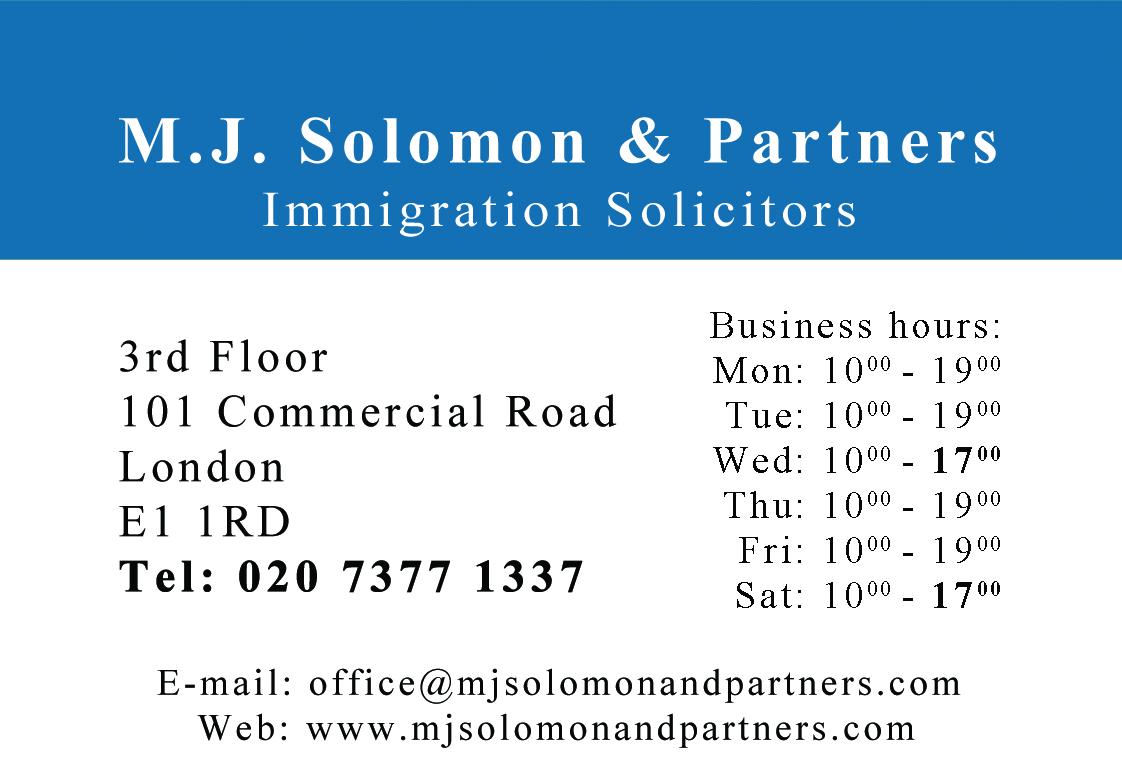
<style>
.page{position:relative;width:1122px;height:768px;background:#ffffff}
.page>*{position:absolute;margin:0}
.t1{font:66.7px "TimesNewRomanPS-BoldMT";letter-spacing:0.1em;color:#ffffff}
.t2{font:50px "TimesNewRomanPSMT";letter-spacing:0.1em;color:#ffffff;scale:1.06 1}
.t3{font:37.5px "TimesNewRomanPSMT";letter-spacing:0.1em;color:#060808}
.t4{font:37.5px "TimesNewRomanPSMT";letter-spacing:0.1em;color:#060808;font-variant:small-caps}
.t5{font:37.5px "TimesNewRomanPS-BoldMT";letter-spacing:0.1em;color:#060808;font-variant:small-caps}
.t6{font:45.8px "TimesNewRomanPSMT";letter-spacing:0.1em;color:#060808}
.t7{font:45.8px "TimesNewRomanPS-BoldMT";letter-spacing:0.1em;color:#060808;font-weight:bold}
</style>
<div class="page">
<p class="t1" style="left:119px;top:117px;width:877px;height:47px">M.J. Solomon &amp; Partners</p>
<p class="t2" style="left:263px;top:191px;width:592px;height:46px">Immigration Solicitors</p>
<p class="t3" style="left:710px;top:311px;width:290px;height:297px;text-align:right">Business hours:<br>Mon: 1000 <span class="t4">- 1900<br></span>Tue: 1000 <span class="t4">- 1900<br></span>Wed: 1000 <span class="t4">- </span><span class="t5">1700<br></span>Thu: 1000 <span class="t4">- 1900<br></span>Fri: 1000 <span class="t4">- 1900<br></span>Sat: 1000 <span class="t4">- </span><span class="t5">1700</span></p>
<p class="t6" style="left:119px;top:339px;width:498px;height:254px">3rd Floor <br>101 Commercial Road<br>London <br>E1 1RD<br><span class="t7">Tel: 020 7377 1337</span></p>
<p class="t3" style="left:157px;top:668px;width:804px;height:80px">E-mail: office@mjsolomonandpartners.com<br>   Web: www.mjsolomonandpartners.com</p>
</div>
